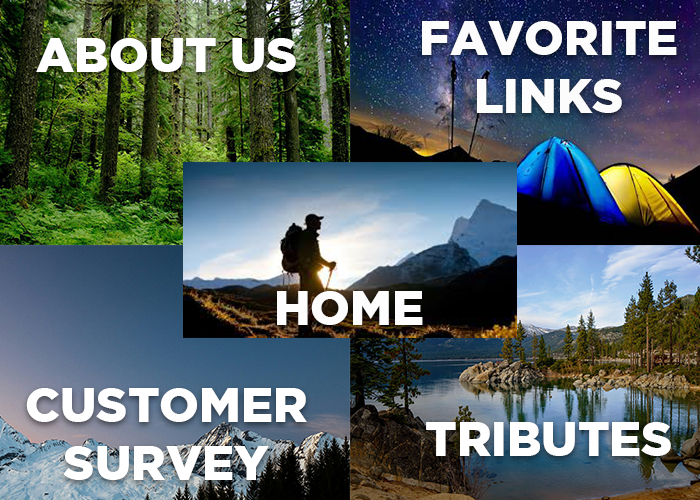
<style>
.page{position:relative;width:700px;height:500px}
.page>*{position:absolute;margin:0}
.t1{font:48px "GothamBlack";color:#fcfcfc}
.t2{font:48px "GothamBlack";color:#ffffff}
.t3{font:48px "GothamBlack";color:#fdfdfd}
</style>
<div class="page">
<p class="t1" style="left:422px;top:21px;width:255px;height:92px;text-align:center">FAVORITE<br>LINKS</p>
<p class="t2" style="left:36px;top:38px;width:260px;height:34px">ABOUT US</p>
<p class="t3" style="left:277px;top:291px;width:146px;height:34px">HOME</p>
<p class="t2" style="left:26px;top:388px;width:281px;height:92px;text-align:center">CUSTOMER<br>SURVEY</p>
<p class="t2" style="left:426px;top:422px;width:245px;height:34px">TRIBUTES</p>
</div>
